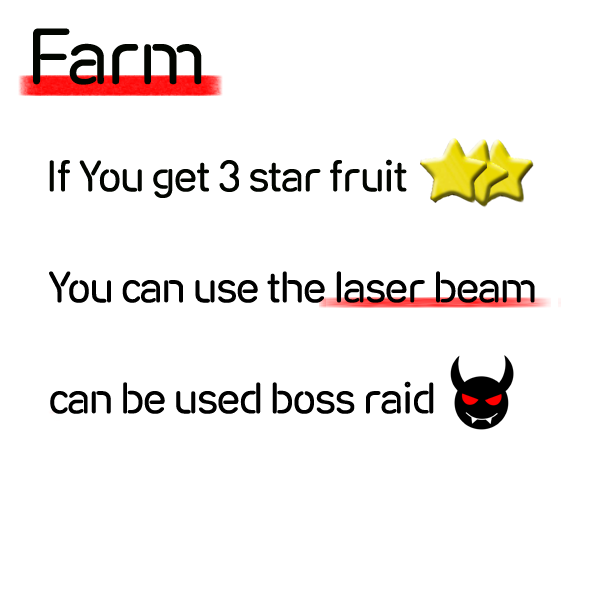
<style>
.page{position:relative;width:600px;height:600px;background:#ffffff}
.page>*{position:absolute;margin:0}
.t1{font:72px "RixNeonSignB";letter-spacing:-0.05em;color:#020500}
.t2{font:40px "RixNeonSignB";letter-spacing:-0.05em;color:#020500}
.t3{font:40px "RixNeonSignB";letter-spacing:-0.05em;color:#000000}
</style>
<div class="page">
<p class="t1" style="left:33px;top:28px;width:169px;height:57px">Farm</p>
<p class="t2" style="left:49px;top:159px;width:358px;height:39px">If You get 3 star fruit</p>
<p class="t3" style="left:49px;top:271px;width:486px;height:32px">You can use the laser beam</p>
<p class="t3" style="left:50px;top:381px;width:384px;height:33px">can be used boss raid</p>
</div>
